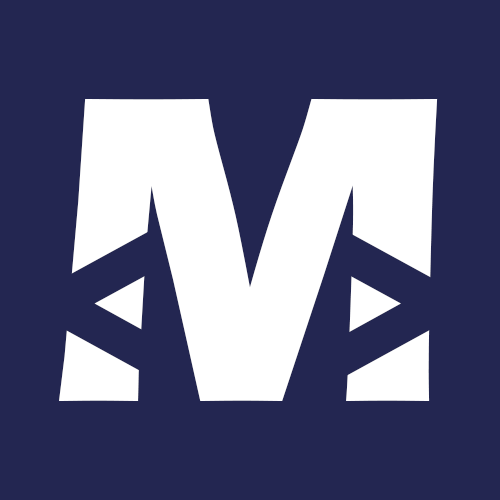
<style>
.page{position:relative;width:500px;height:500px;background:#232651}
.page>*{position:absolute;margin:0}
.t1{font:452.5px "ErasITC-Bold";color:#ffffff}
.t2{font:238.7px "ErasITC-Bold";color:#232651}
</style>
<div class="page">
<p class="t1" style="left:59px;top:98px;width:379px;height:303px">M</p>
<p class="t2" style="left:49px;top:228px;width:105px;height:150px">&lt;</p>
<p class="t2" style="left:342px;top:228px;width:104px;height:150px;rotate:180deg">&lt;</p>
</div>
